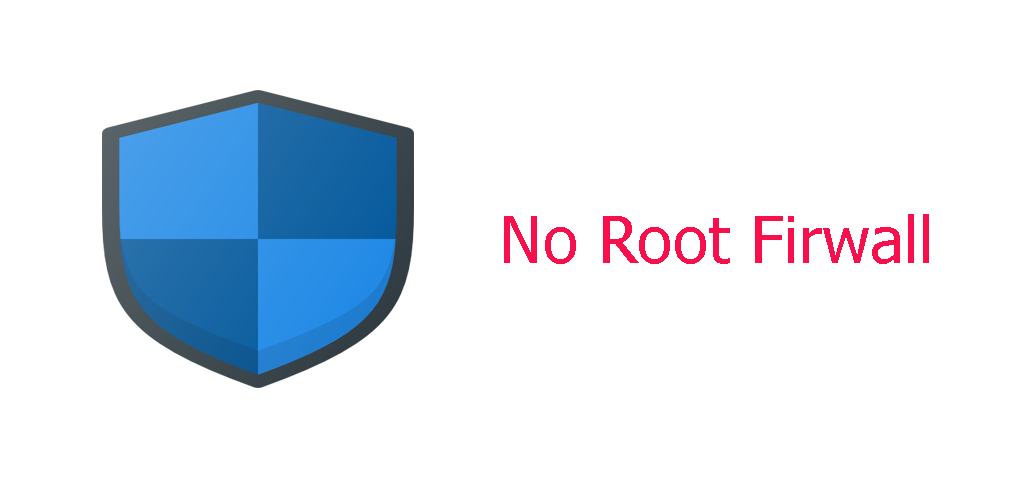
<style>
.page{position:relative;width:1024px;height:500px;background:#ffffff}
.page>*{position:absolute;margin:0}
.t1{font:65px "Tahoma";color:#f7104c}
</style>
<div class="page">
<p class="t1" style="left:504px;top:214px;width:425px;height:50px">No Root Firwall</p>
</div>
